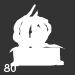
<style>
.page{position:relative;width:75px;height:75px;background:#333333}
.page>*{position:absolute;margin:0}
.t1{font:12px "MyriadPro-Regular";color:#ffffff}
</style>
<div class="page">
<p class="t1" style="left:4px;top:64px;width:12px;height:8px">80</p>
</div>
